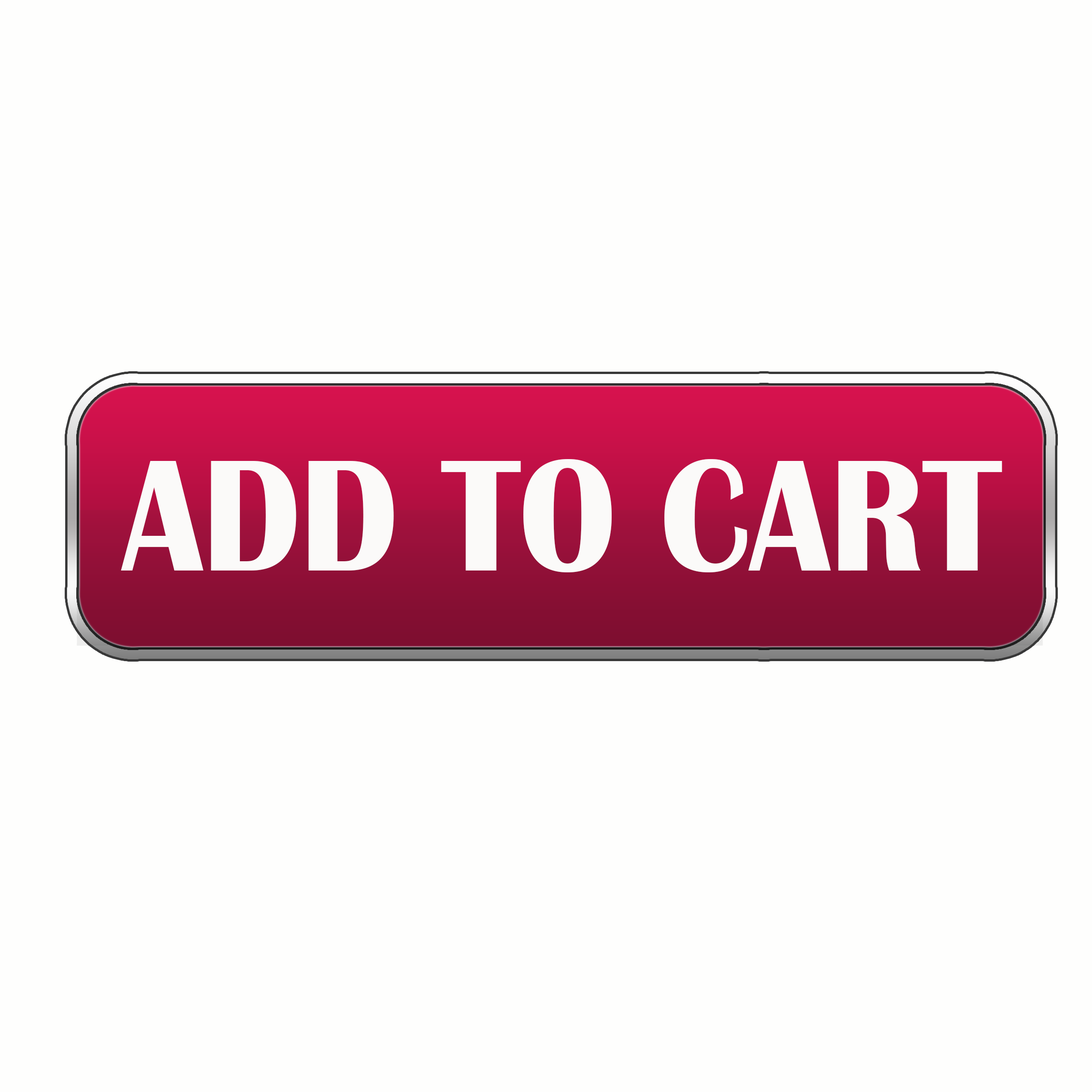
<style>
.page{position:relative;width:1092px;height:1092px;background:#fefefd}
.page>*{position:absolute;margin:0}
.t1{font:164.7px "BritannicBold";color:#fbfaf9;scale:0.9 1}
</style>
<div class="page">
<p class="t1" style="left:121px;top:459px;width:881px;height:113px">ADD TO CART</p>
</div>
